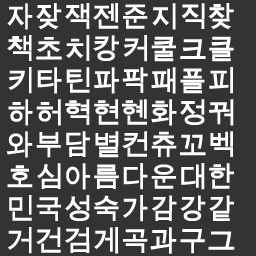
<style>
.page{position:relative;width:256px;height:256px;background:#333333}
.page>*{position:absolute;margin:0}
.t1{font:28px "ArialUnicodeMS";color:#ffffff;font-weight:bold}
</style>
<div class="page">
<p class="t1" style="left:6px;top:3px;width:229px;height:251px">자잦잭젠준지직찾<br>책초치캉커쿨크클<br>키타틴파팍패플피<br>하허혁현혠화정꿔<br>와부담별컨츄꼬벡<br>호심아름다운대한<br>민국성숙가감강같<br>거건검게곡과구그</p>
</div>
